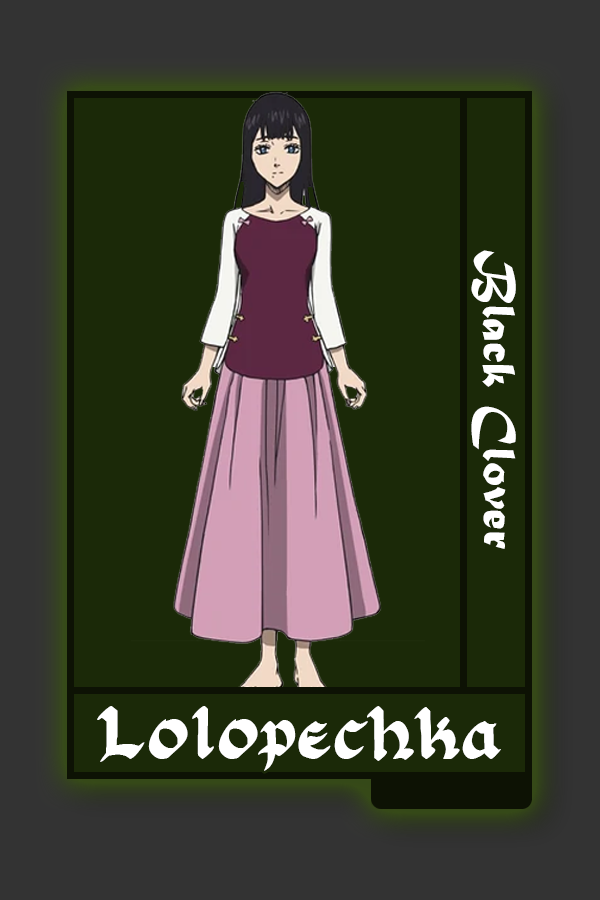
<style>
.page{position:relative;width:600px;height:900px;background:#1b2908}
.page>*{position:absolute;margin:0}
.t1{font:48.8px "MaturaMTScriptCapitals";color:#ffffff}
.t2{font:64.6px "FloranteatLaura";color:#ffffff}
</style>
<div class="page">
<p class="t1" style="left:471px;top:250px;width:45px;height:299px;rotate:90deg">Black Clover</p>
<p class="t2" style="left:97px;top:706px;width:404px;height:65px">Lolopechka</p>
</div>
